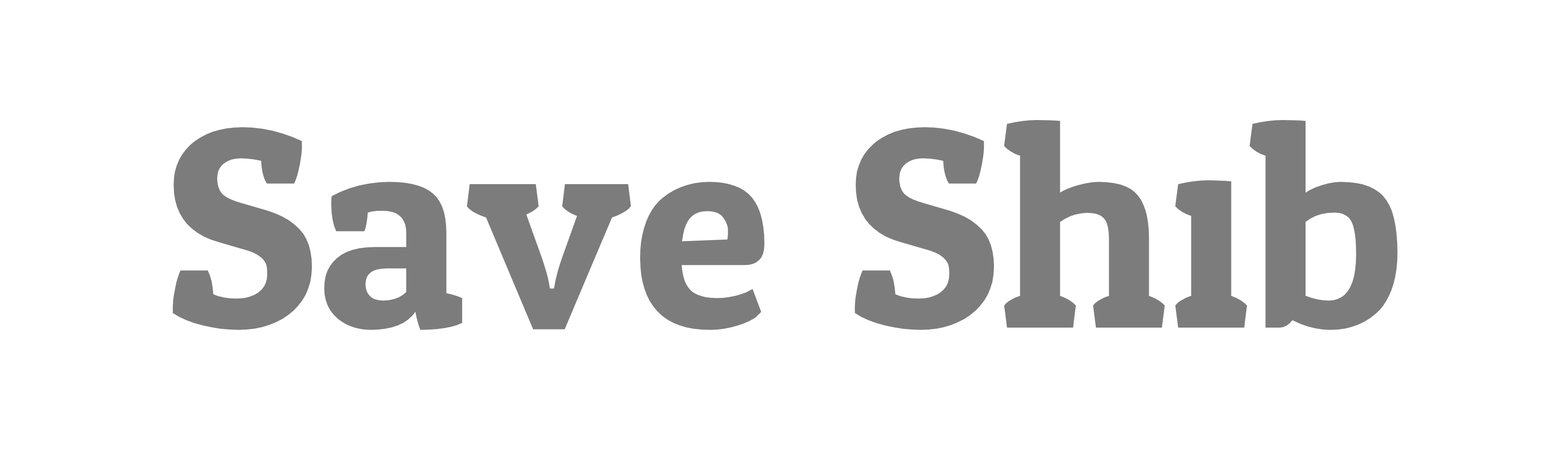
<style>
.page{position:relative;width:1568px;height:451px;background:#ffffff}
.page>*{position:absolute;margin:0}
.t1{font:286.8px "OdorMeanChey-Regular";color:#7c7c7c}
</style>
<div class="page">
<p class="t1" style="left:173px;top:120px;width:1225px;height:210px">Save Shib</p>
</div>
